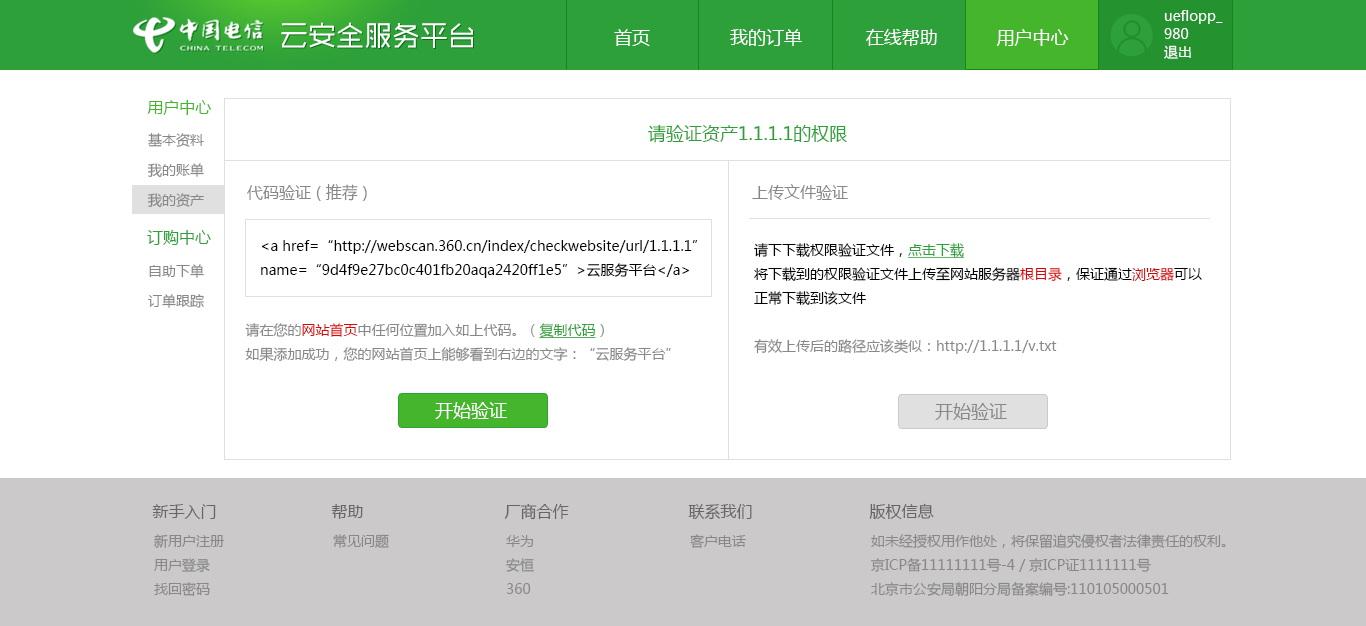
<style>
.page{position:relative;width:1366px;height:626px;background:#ffffff}
.page>*{position:absolute;margin:0}
.t1{font:14px/18px "MicrosoftYaHei";color:#ffffff}
.t2{font:28px "MFShangHei_Noncommercial-Regular";color:#ffffff}
.t3{font:28px "MFShangHei_Noncommercial-Regular"}
.t4{font:18px "MicrosoftYaHei";color:#ffffff}
.t5{font:16px "MicrosoftYaHei";color:#45b62b}
.t6{font:18px "MicrosoftYaHei";color:#2da039}
.t7{font:14px/30px "MicrosoftYaHei";color:#888888}
.t8{font:16px "MicrosoftYaHei";color:#888888}
.t9{font:16px "MicrosoftYaHei";color:#2da039}
.t10{font:14px/24px "MicrosoftYaHei";color:#010000}
.t11{font:14px/24px "MicrosoftYaHei";color:#888888}
.t12{font:14px/24px "MicrosoftYaHei";color:#2da039;text-decoration:underline}
.t13{font:14px/24px "MicrosoftYaHei";color:#da0303}
.t14{font:14px/24px "MicrosoftYaHei";color:#d10101}
.t15{font:14px/24px "MicrosoftYaHei";color:#db0606}
.t16{font:18px "MicrosoftYaHei";color:#888888}
.t17{font:16px "MicrosoftYaHei";color:#666666}
.t18{font:14px "MicrosoftYaHei";color:#888888}
</style>
<div class="page">
<p class="t1" style="left:1164px;top:10px;width:59px;height:49px">ueflopp_<br>980  <br>退出</p>
<p class="t2" style="left:281px;top:22px;width:192px;height:26px">云安全服务平台</p>
<p class="t3" style="left:282px;top:23px;width:192px;height:26px">云安全服务平台</p>
<p class="t4" style="left:614px;top:29px;width:455px;height:17px">首页               我的订单            在线帮助           用户中心</p>
<p class="t5" style="left:147px;top:100px;width:64px;height:15px">用户中心</p>
<p class="t6" style="left:648px;top:124px;width:199px;height:19px">请验证资产1.1.1.1的权限</p>
<p class="t7" style="left:147px;top:133px;width:57px;height:75px">基本资料<br>我的账单<br>我的资产</p>
<p class="t8" style="left:247px;top:184px;width:120px;height:17px">代码验证 ( 推荐 )</p>
<p class="t8" style="left:752px;top:184px;width:96px;height:16px">上传文件验证</p>
<p class="t9" style="left:147px;top:230px;width:64px;height:15px">订购中心</p>
<p class="t10" style="left:261px;top:240px;width:437px;height:38px">&lt;a href=“http://webscan.360.cn/index/checkwebsite/url/1.1.1.1”<br>name=“9d4f9e27bc0c401fb20aqa2420ff1e5”&gt;云服务平台&lt;/a&gt;</p>
<p class="t11" style="left:754px;top:243px;width:448px;height:111px"><span class="t10">请下下载权限验证文件，</span><span class="t12">点击下载<br></span><span class="t10">将下载到的权限验证文件上传至网站服务器</span><span class="t13">根目录</span><span class="t10">，保证通过</span><span class="t14">浏览器</span><span class="t10">可以<br>正常下载到该文件<br><br></span>有效上传后的路径应该类似：http://1.1.1.1/v.txt</p>
<p class="t7" style="left:148px;top:264px;width:56px;height:44px">自助下单<br>订单跟踪</p>
<p class="t11" style="left:245px;top:323px;width:426px;height:39px">请在您的<span class="t15">网站首页</span>中任何位置加入如上代码。（<span class="t12">复制代码</span>）<br>如果添加成功，您的网站首页上能够看到右边的文字：“云服务平台”</p>
<p class="t4" style="left:435px;top:402px;width:72px;height:17px">开始验证</p>
<p class="t16" style="left:935px;top:403px;width:72px;height:17px">开始验证</p>
<p class="t17" style="left:152px;top:504px;width:64px;height:15px">新手入门</p>
<p class="t17" style="left:331px;top:504px;width:32px;height:15px">帮助</p>
<p class="t17" style="left:504px;top:503px;width:65px;height:17px">厂商合作</p>
<p class="t17" style="left:688px;top:504px;width:64px;height:16px">联系我们</p>
<p class="t17" style="left:869px;top:503px;width:65px;height:16px">版权信息</p>
<p class="t11" style="left:154px;top:534px;width:70px;height:62px">新用户注册<br>用户登录<br>找回密码</p>
<p class="t18" style="left:333px;top:534px;width:56px;height:14px">常见问题</p>
<p class="t18" style="left:690px;top:534px;width:56px;height:14px">客户电话</p>
<p class="t11" style="left:871px;top:534px;width:355px;height:63px">如未经授权用作他处，将保留追究侵权者法律责任的权利。<br>京ICP备11111111号-4 / 京ICP证1111111号<br>北京市公安局朝阳分局备案编号:110105000501</p>
<p class="t11" style="left:506px;top:535px;width:28px;height:59px">华为<br>安恒<br>360</p>
</div>
